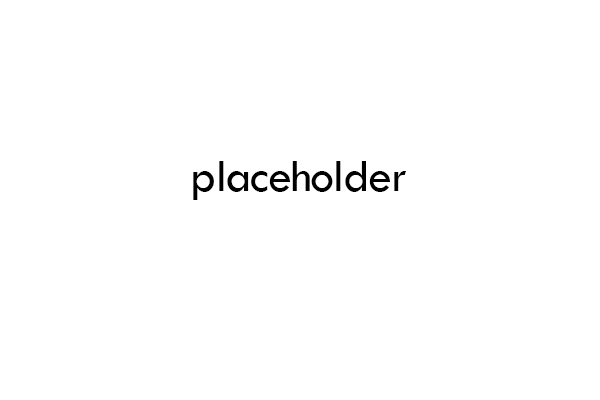
<style>
.page{position:relative;width:600px;height:400px;background:#ffffff}
.page>*{position:absolute;margin:0}
.t1{font:48.1px "TwCenMT-Regular";letter-spacing:-0.025em;color:#000000}
</style>
<div class="page">
<p class="t1" style="left:193px;top:161px;width:213px;height:39px">placeholder</p>
</div>
